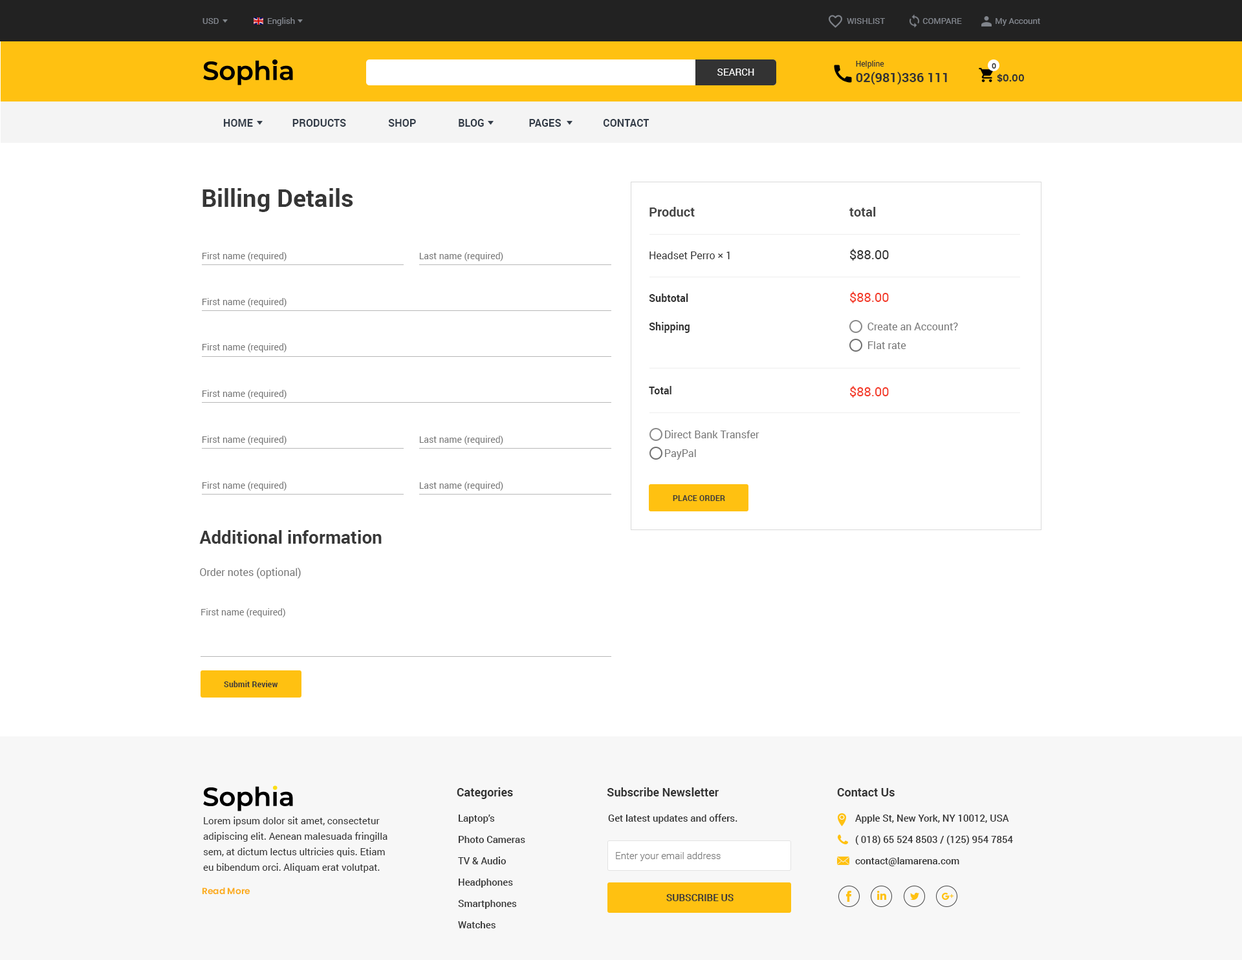
<style>
.page{position:relative;width:1242px;height:960px;background:#ffffff}
.page>*{position:absolute;margin:0}
.t1{font:8.4px "Roboto-Regular";color:#81858c}
.t2{font:12.9px "Roboto-Bold";color:#333333}
.t3{font:7.8px "Roboto-Regular";color:#333333}
.t4{font:7.1px "Poppins-SemiBold";color:#333333}
.t5{font:9.7px "Roboto-Regular";color:#ffffff}
.t6{font:9.7px "Poppins-SemiBold";color:#333333}
.t7{font:10.3px "Roboto-Bold";color:#333c48}
.t8{font:24.6px "Roboto-Bold";color:#363636}
.t9{font:10.3px/15.5px "Roboto-Regular";color:#787878}
.t10{font:12.9px/14.2px "Roboto-Bold";color:#444444}
.t11{font:10.3px/14.2px "Roboto-Regular";color:#333333}
.t12{font:10.3px/14.2px "Roboto-Bold";color:#333333}
.t13{font:10.3px/21.3px "Roboto-Bold";color:#333333}
.t14{font:10.3px/18.8px "Roboto-Regular";color:#787878}
.t15{font:10.3px/14.2px "Roboto-Regular";color:#787878}
.t16{font:12.9px/14.2px "Roboto-Regular";color:#333333}
.t17{font:12.9px/14.2px "Roboto-Regular";color:#f33927}
.t18{font:12.9px/18.8px "Roboto-Regular";color:#f33927}
.t19{font:9.1px "Roboto-Regular";color:#777777}
.t20{font:7.8px "Roboto-Bold";color:#383838;scale:1.03 1}
.t21{font:18.1px/16.2px "Roboto-Bold";color:#383838}
.t22{font:10.3px/16.2px "Roboto-Regular";color:#777777}
.t23{font:9px "Roboto-Regular";color:#777777}
.t24{font:11.6px "Roboto-Bold";color:#333333}
.t25{font:9.7px/15.5px "Roboto-Regular";color:#333333}
.t26{font:9.7px/21.3px "Roboto-Medium";color:#333333}
.t27{font:9.7px "Roboto-Medium";color:#333333}
.t28{font:9.7px "Roboto-Light";color:#777777}
.t29{font:8.8px "Poppins-SemiBold";color:#fbad1a}
.t30{font:9.7px "Roboto-Bold";color:#383838}
</style>
<div class="page">
<p class="t1" style="left:268px;top:17px;width:27px;height:9px">English</p>
<p class="t1" style="left:202px;top:18px;width:17px;height:6px">USD</p>
<p class="t1" style="left:847px;top:18px;width:193px;height:8px">WISHLIST                  COMPARE                My Account</p>
<p class="t2" style="left:856px;top:60px;width:91px;height:25px"><span class="t3">Helpline<br></span>02(981)336 111</p>
<p class="t4" style="left:991px;top:63px;width:5px;height:6px">0</p>
<p class="t5" style="left:717px;top:69px;width:37px;height:7px">SEARCH</p>
<p class="t6" style="left:997px;top:74px;width:27px;height:9px">$0.00</p>
<p class="t7" style="left:224px;top:119px;width:425px;height:8px">HOME               PRODUCTS                SHOP                BLOG                 PAGES                CONTACT</p>
<p class="t8" style="left:202px;top:188px;width:151px;height:24px">Billing Details</p>
<p class="t9" style="left:649px;top:207px;width:110px;height:253px"><span class="t10">Product<br><br><br></span><span class="t11">Headset Perro × 1 <br><br><br></span><span class="t12">Subtotal <br><br>Shipping<br><br><br><br></span><span class="t13">Total<br><br><br></span>      Direct Bank Transfer<br><span class="t14">      PayPal</span></p>
<p class="t15" style="left:849px;top:207px;width:109px;height:191px"><span class="t10">total<br><br><br></span><span class="t16">$88.00 <br><br><br></span><span class="t17">$88.00  <br><br></span>       Create an Account?<br><span class="t14">       Flat rate<br><br><br></span><span class="t18">$88.00</span></p>
<p class="t19" style="left:202px;top:252px;width:84px;height:9px">First name (required)</p>
<p class="t19" style="left:419px;top:252px;width:84px;height:9px">Last name (required)</p>
<p class="t19" style="left:202px;top:298px;width:84px;height:9px">First name (required)</p>
<p class="t19" style="left:202px;top:343px;width:84px;height:9px">First name (required)</p>
<p class="t19" style="left:202px;top:390px;width:84px;height:9px">First name (required)</p>
<p class="t19" style="left:202px;top:436px;width:84px;height:9px">First name (required)</p>
<p class="t19" style="left:419px;top:436px;width:84px;height:9px">Last name (required)</p>
<p class="t19" style="left:202px;top:482px;width:84px;height:9px">First name (required)</p>
<p class="t19" style="left:419px;top:482px;width:84px;height:9px">Last name (required)</p>
<p class="t20" style="left:673px;top:495px;width:52px;height:6px">PLACE ORDER</p>
<p class="t21" style="left:199px;top:530px;width:183px;height:49px">Additional information<br><br><span class="t22">Order notes (optional)</span></p>
<p class="t23" style="left:201px;top:609px;width:84px;height:9px">First name (required)</p>
<p class="t20" style="left:224px;top:681px;width:54px;height:6px">Submit Review</p>
<p class="t24" style="left:457px;top:788px;width:56px;height:11px">Categories</p>
<p class="t24" style="left:607px;top:788px;width:111px;height:9px">Subscribe Newsletter</p>
<p class="t24" style="left:837px;top:788px;width:57px;height:9px">Contact Us</p>
<p class="t25" style="left:203px;top:817px;width:184px;height:56px">Lorem ipsum dolor sit amet, consectetur adipiscing elit. Aenean malesuada fringilla sem, at dictum lectus ultricies quis. Etiam eu bibendum orci. Aliquam erat volutpat.</p>
<p class="t26" style="left:458px;top:815px;width:67px;height:114px">Laptop’s<br>Photo Cameras<br>TV &amp; Audio<br>Headphones<br>Smartphones<br>Watches</p>
<p class="t27" style="left:608px;top:814px;width:129px;height:10px">Get latest updates and offers.</p>
<p class="t26" style="left:855px;top:815px;width:158px;height:52px">Apple St, New York, NY 10012, USA<br>( 018) 65 524 8503 / (125) 954 7854<br>contact@lamarena.com</p>
<p class="t28" style="left:616px;top:852px;width:104px;height:9px">Enter your email address</p>
<p class="t29" style="left:202px;top:887px;width:48px;height:8px">Read More</p>
<p class="t30" style="left:666px;top:894px;width:67px;height:8px">SUBSCRIBE US</p>
</div>
